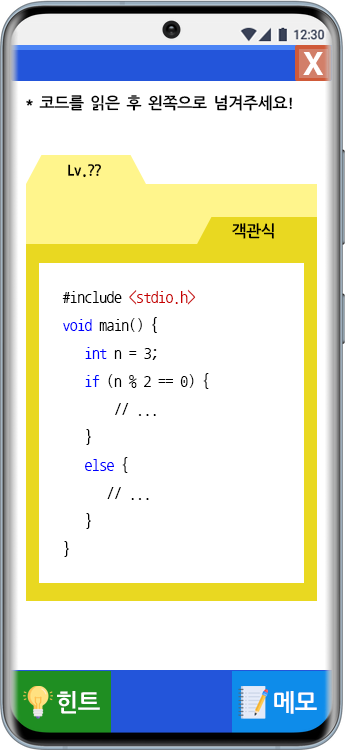
<style>
.page{position:relative;width:345px;height:750px;background:#ffffff}
.page>*{position:absolute;margin:0}
.t1{font:30px "H2gtrE";color:#ffffff}
.t2{font:16px "NanumGothicCoding-Bold";letter-spacing:-0.08em;color:#000000}
.t3{font:16px "NanumGothicCoding";letter-spacing:-0.04em;color:#000000}
.t4{font:16px "NanumGothicCoding";letter-spacing:-0.04em;color:#c80000}
.t5{font:16px "NanumGothicCoding";letter-spacing:-0.04em;color:#0000ff}
.t6{font:16px "NanumGothicCoding";letter-spacing:-0.04em;color:#000fff}
.t7{font:24px "NanumGothicCoding-Bold";letter-spacing:-0.08em;color:#ffffff}
</style>
<div class="page">
<p class="t1" style="left:303px;top:52px;width:20px;height:23px">X</p>
<p class="t2" style="left:26px;top:95px;width:266px;height:16px">* 코드를 읽은 후 왼쪽으로 넘겨주세요!</p>
<p class="t2" style="left:68px;top:164px;width:33px;height:14px">Lv.??</p>
<p class="t2" style="left:232px;top:223px;width:42px;height:16px">객관식</p>
<p class="t3" style="left:62px;top:289px;width:147px;height:268px">#include <span class="t4">&lt;stdio.h&gt;<br></span><span class="t5">void</span> main() {<br>   <span class="t5">int</span> n = 3;<br>   <span class="t6">if</span> (n % 2 == 0) {<br>       // ...<br>   }<br>  <span class="t5"> else</span> {<br>      // ...<br>   }<br>}</p>
<p class="t7" style="left:57px;top:691px;width:43px;height:23px">힌트</p>
<p class="t7" style="left:274px;top:691px;width:43px;height:23px">메모</p>
</div>
